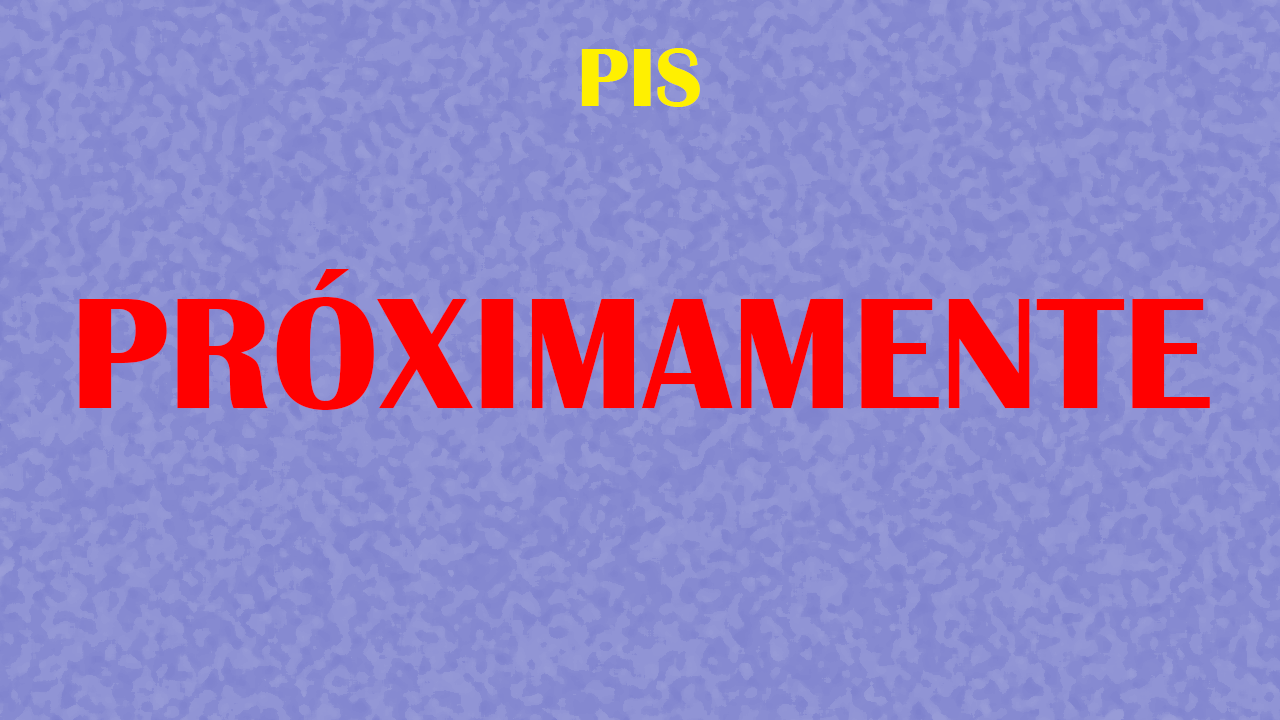
<style>
.page{position:relative;width:1280px;height:720px;background:#868ad1}
.page>*{position:absolute;margin:0}
.t1{font:86.1px "BritannicBold";color:#fff000}
.t2{font:164px "BritannicBold";color:#ff0000}
</style>
<div class="page">
<p class="t1" style="left:581px;top:48px;width:119px;height:59px">PIS</p>
<p class="t2" style="left:79px;top:269px;width:1131px;height:141px">PRÓXIMAMENTE</p>
</div>
